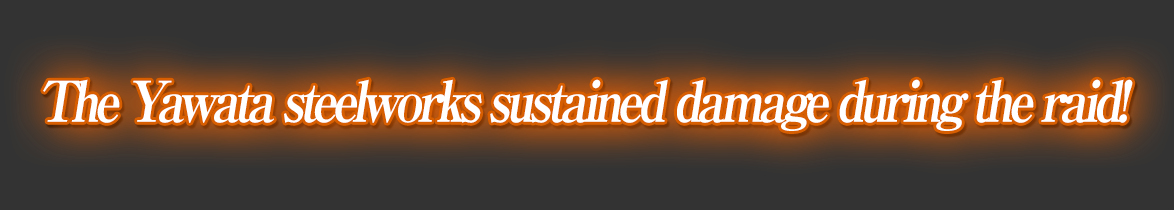
<style>
.page{position:relative;width:1174px;height:210px;background:#333333}
.page>*{position:absolute;margin:0}
.t1{font:56px "RyuminPro-ExBold";letter-spacing:-0.1em;color:#ffffff;font-style:italic;scale:0.9 1}
</style>
<div class="page">
<p class="t1" style="left:43px;top:79px;width:1090px;height:52px">The Yawata steelworks sustained damage during the raid!</p>
</div>
